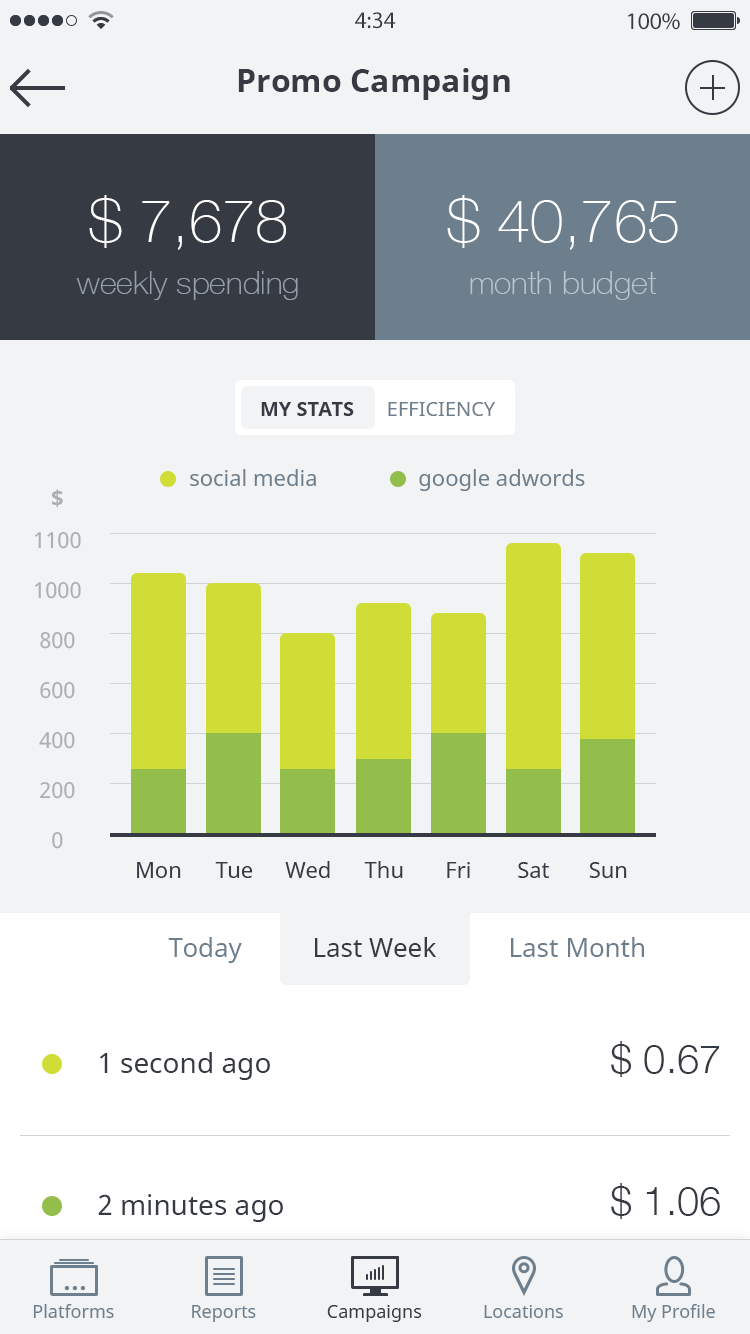
<style>
.page{position:relative;width:750px;height:1334px;background:#f1f3f4}
.page>*{position:absolute;margin:0}
.t1{font:24px "MyriadPro-Regular";color:#363a43}
.t2{font:32px "NotoSans-Bold";color:#363a43}
.t3{font:60px "HelveticaNeue-Thin";color:#ffffff}
.t4{font:32px "HelveticaNeue-Thin";color:#949fa9}
.t5{font:32px "HelveticaNeue-Thin";color:#bac4cc}
.t6{font:20px "NotoSans-Bold";color:#363a43;text-transform:uppercase}
.t7{font:20px "NotoSans";color:#6d7e8c;text-transform:uppercase}
.t8{font:22px "NotoSans";color:#6d7e8c}
.t9{font:22px "NotoSans-Bold";color:#aaafb3}
.t10{font:22px "NotoSans";color:#aaafb3}
.t11{font:22px "NotoSans";color:#363a42}
.t12{font:26px "NotoSans";color:#6d7e8c}
.t13{font:26px "NotoSans";color:#363a42}
.t14{font:40px "HelveticaNeue-Light";color:#363a42}
.t15{font:28px "NotoSans";color:#363a42}
.t16{font:18px "NotoSans";color:#6d7e8c}
.t17{font:18px "NotoSans";color:#363a42}
</style>
<div class="page">
<p class="t1" style="left:355px;top:12px;width:41px;height:17px">4:34</p>
<p class="t1" style="left:628px;top:13px;width:52px;height:17px">100%</p>
<p class="t2" style="left:238px;top:68px;width:272px;height:32px">Promo Campaign</p>
<p class="t3" style="left:89px;top:195px;width:197px;height:55px">$ 7,678</p>
<p class="t3" style="left:447px;top:195px;width:231px;height:55px">$ 40,765</p>
<p class="t4" style="left:76px;top:271px;width:222px;height:29px">weekly spending</p>
<p class="t5" style="left:470px;top:271px;width:186px;height:29px">month budget</p>
<p class="t6" style="left:261px;top:402px;width:93px;height:14px">My Stats</p>
<p class="t7" style="left:388px;top:402px;width:107px;height:14px">Efficiency</p>
<p class="t8" style="left:190px;top:469px;width:126px;height:17px">social media</p>
<p class="t8" style="left:419px;top:469px;width:166px;height:22px">google adwords</p>
<p class="t9" style="left:52px;top:489px;width:11px;height:18px">$</p>
<p class="t10" style="left:35px;top:531px;width:46px;height:18px">1100</p>
<p class="t10" style="left:35px;top:581px;width:46px;height:18px">1000</p>
<p class="t10" style="left:40px;top:631px;width:35px;height:18px">800</p>
<p class="t10" style="left:40px;top:681px;width:35px;height:18px">600</p>
<p class="t10" style="left:39px;top:731px;width:36px;height:18px">400</p>
<p class="t10" style="left:40px;top:781px;width:35px;height:18px">200</p>
<p class="t10" style="left:52px;top:831px;width:11px;height:18px">0</p>
<p class="t11" style="left:137px;top:862px;width:44px;height:16px">Mon</p>
<p class="t11" style="left:215px;top:862px;width:38px;height:16px">Tue</p>
<p class="t11" style="left:285px;top:861px;width:45px;height:17px">Wed</p>
<p class="t11" style="left:364px;top:861px;width:39px;height:17px">Thu</p>
<p class="t11" style="left:447px;top:862px;width:23px;height:16px">Fri</p>
<p class="t11" style="left:518px;top:862px;width:32px;height:16px">Sat</p>
<p class="t11" style="left:589px;top:862px;width:38px;height:16px">Sun</p>
<p class="t12" style="left:168px;top:937px;width:74px;height:26px">Today</p>
<p class="t13" style="left:315px;top:937px;width:121px;height:20px">Last Week</p>
<p class="t12" style="left:511px;top:937px;width:133px;height:20px">Last Month</p>
<p class="t14" style="left:611px;top:1041px;width:108px;height:36px">$ 0.67</p>
<p class="t15" style="left:100px;top:1052px;width:170px;height:28px">1 second ago</p>
<p class="t14" style="left:611px;top:1183px;width:109px;height:36px">$ 1.06</p>
<p class="t15" style="left:98px;top:1194px;width:185px;height:28px">2 minutes ago</p>
<p class="t16" style="left:33px;top:1304px;width:81px;height:14px">Platforms</p>
<p class="t16" style="left:192px;top:1305px;width:64px;height:17px">Reports</p>
<p class="t17" style="left:327px;top:1305px;width:95px;height:17px">Campaigns</p>
<p class="t16" style="left:484px;top:1305px;width:79px;height:13px">Locations</p>
<p class="t16" style="left:632px;top:1304px;width:83px;height:18px">My Profile</p>
</div>
